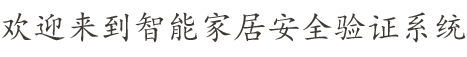
<style>
.page{position:relative;width:467px;height:57px;background:#ffffff}
.page>*{position:absolute;margin:0}
.t1{font:33.3px "KaiTi";color:#3d3935}
</style>
<div class="page">
<p class="t1" style="left:2px;top:12px;width:464px;height:31px">欢迎来到智能家居安全验证系统</p>
</div>
